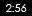
<style>
.page{position:relative;width:32px;height:16px;background:#000000}
.page>*{position:absolute;margin:0}
.t1{font:10.7px "CenturyGothic";color:#ffffff}
</style>
<div class="page">
<p class="t1" style="left:6px;top:4px;width:21px;height:8px">2:56</p>
</div>
